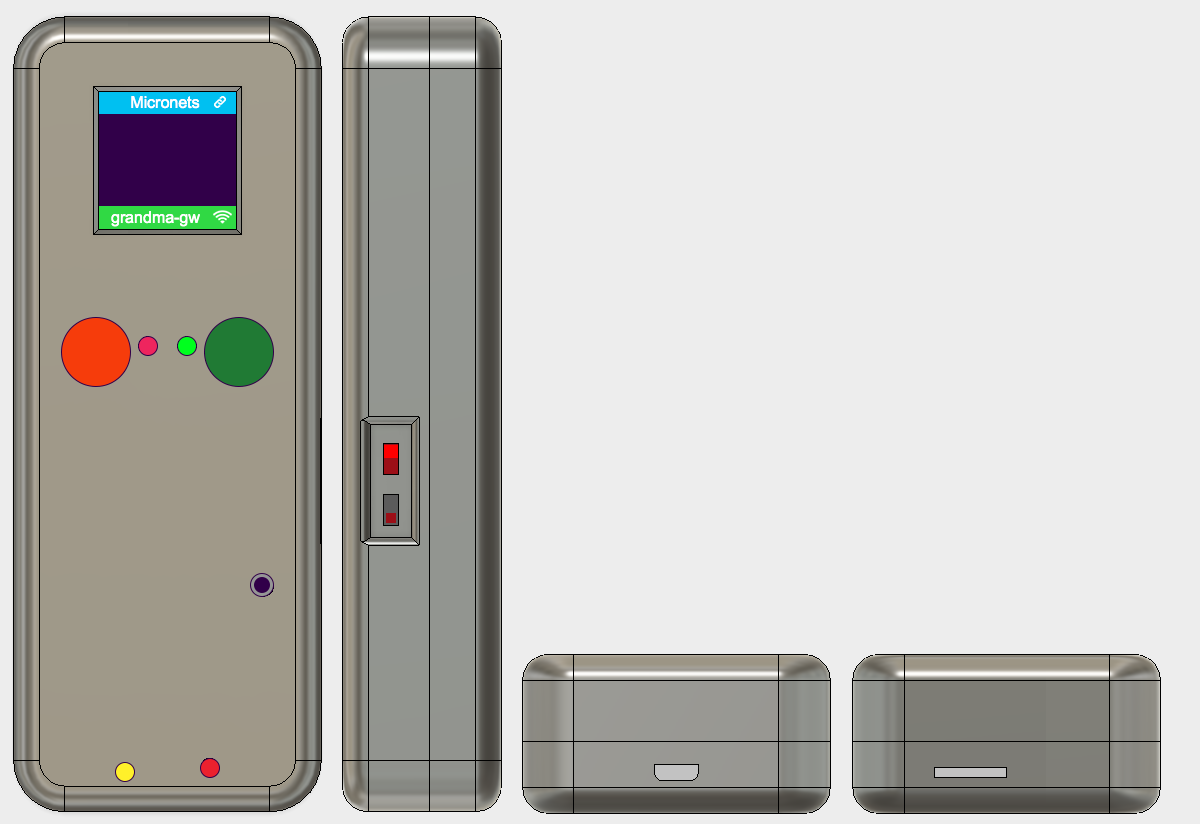
<style>
.page{position:relative;width:1200px;height:824px;background:#ededed}
.page>*{position:absolute;margin:0}
.t1{font:16px "ArialMT";color:#ffffff}
</style>
<div class="page">
<p class="t1" style="left:131px;top:96px;width:69px;height:13px">Micronets</p>
<p class="t1" style="left:111px;top:211px;width:89px;height:16px">grandma-gw</p>
</div>
